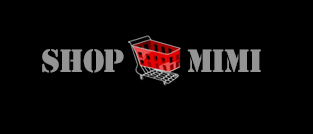
<style>
.page{position:relative;width:313px;height:134px;background:#000000}
.page>*{position:absolute;margin:0}
.t1{font:30px "StencilStd";letter-spacing:-0.04em;color:#949494}
</style>
<div class="page">
<p class="t1" style="left:42px;top:49px;width:219px;height:24px">SHOP       MIMI</p>
</div>
